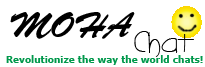
<style>
.page{position:relative;width:205px;height:67px;background:#ffffff}
.page>*{position:absolute;margin:0}
.t1{font:36px "BrushScriptStd";color:#000000}
.t2{font:30px "Ashley";color:#000000}
.t3{font:9px "Verdana-Bold";color:#00984b}
</style>
<div class="page">
<p class="t1" style="left:10px;top:12px;width:125px;height:27px">MOHA</p>
<p class="t2" style="left:134px;top:31px;width:60px;height:26px">Chat</p>
<p class="t3" style="left:6px;top:55px;width:197px;height:10px">Revolutionize the way the world chats!</p>
</div>
